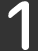
<style>
.page{position:relative;width:38px;height:51px;background:#333333}
.page>*{position:absolute;margin:0}
.t1{font:66.7px "RoundedMplus1c-Medium";color:#ffffff}
</style>
<div class="page">
<p class="t1" style="left:8px;top:1px;width:21px;height:49px">1</p>
</div>
